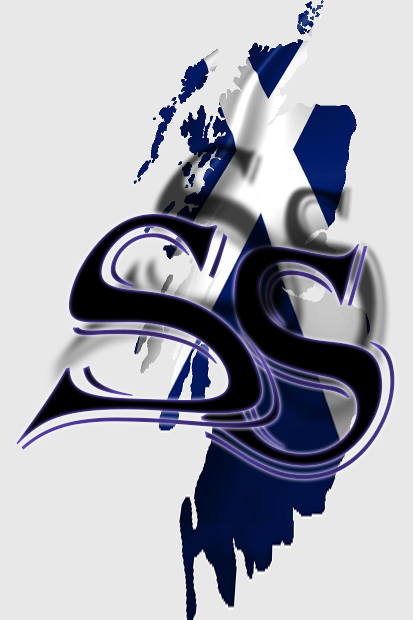
<style>
.page{position:relative;width:413px;height:620px;background:#e8e8e8}
.page>*{position:absolute;margin:0}
.t1{font:353.8px "Algerian";color:#000000;scale:1.14 1}
.t2{font:300.1px "Algerian";color:#000000}
</style>
<div class="page">
<p class="t1" style="left:16px;top:214px;width:264px;height:236px">S</p>
<p class="t2" style="left:200px;top:244px;width:195px;height:236px">S</p>
</div>
